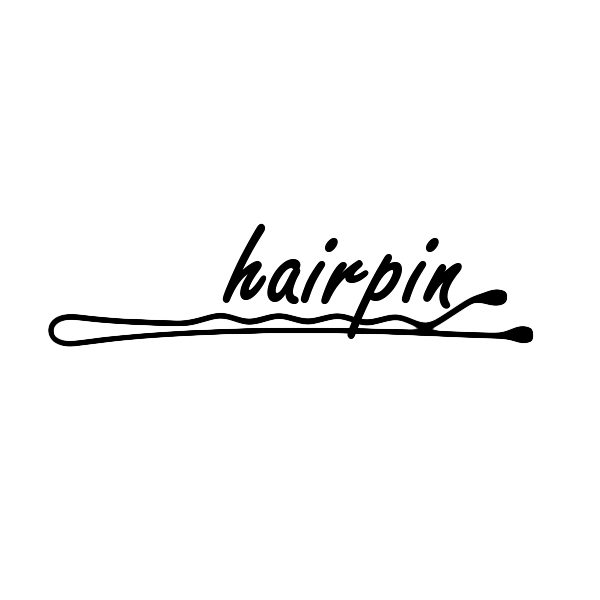
<style>
.page{position:relative;width:600px;height:600px;background:#ffffff}
.page>*{position:absolute;margin:0}
.t1{font:129.2px "FreestyleScript-Regular";color:#000000;font-weight:bold}
</style>
<div class="page">
<p class="t1" style="left:222px;top:223px;width:240px;height:116px">hairpin</p>
<p class="t1" style="left:222px;top:223px;width:240px;height:116px">hairpin</p>
</div>
